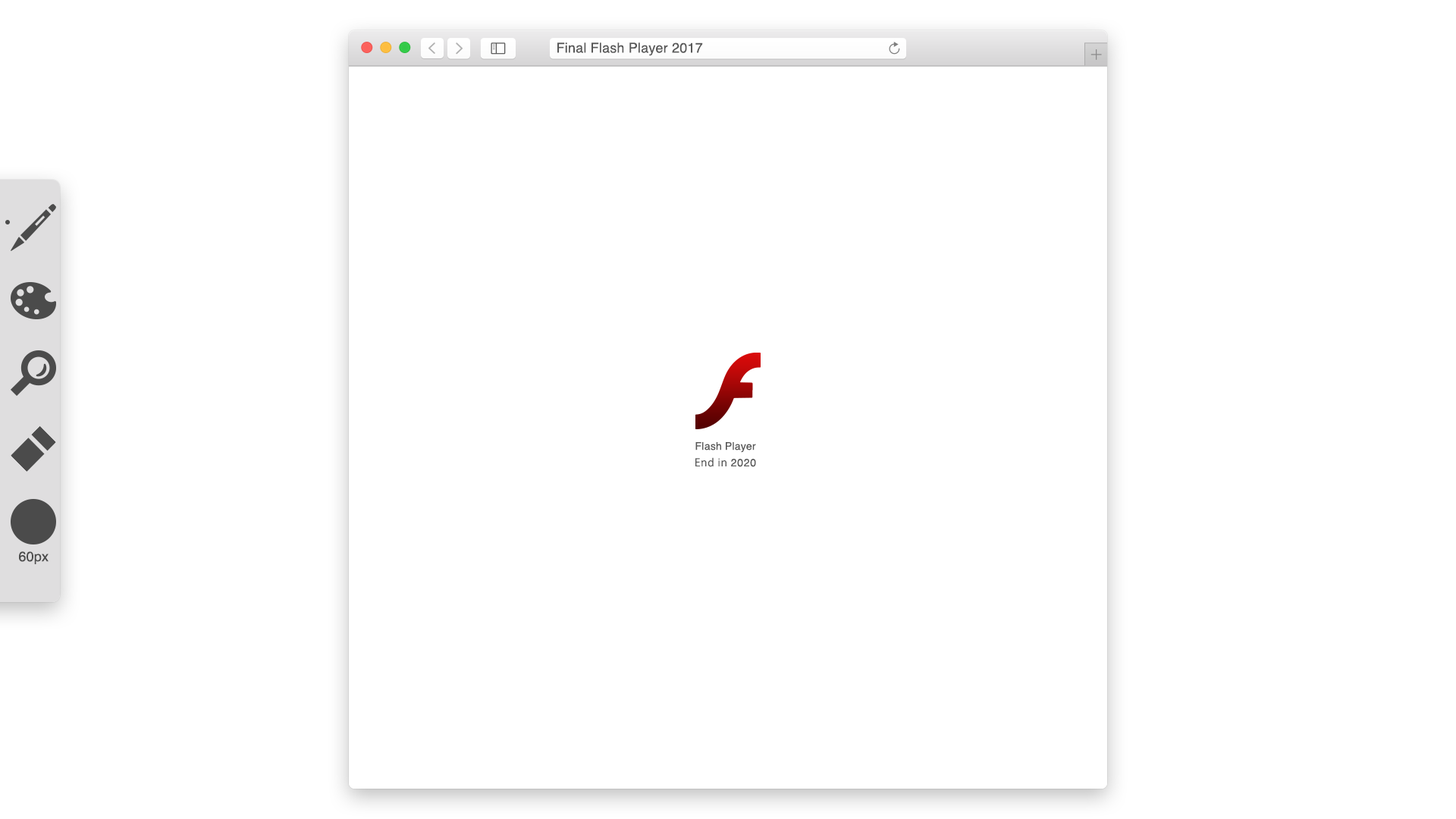
<style>
.page{position:relative;width:1456px;height:819px;background:#ffffff}
.page>*{position:absolute;margin:0}
.t1{font:13.6px "Helvetica";letter-spacing:0.01em;color:#585858}
.t2{font:10.6px/16.6px "Helvetica";letter-spacing:0.01em;color:#585858}
.t3{font:10.6px/16.6px "KozGoPr6N-Regular";letter-spacing:0.05em;color:#585858}
.t4{font:10.6px/16.6px "Helvetica";letter-spacing:0.05em;color:#585858}
.t5{font:13.6px "Helvetica";letter-spacing:0.01em;color:#4b4b4b}
</style>
<div class="page">
<p class="t1" style="left:557px;top:42px;width:146px;height:14px">Final Flash Player 2017</p>
<p class="t2" style="left:695px;top:442px;width:61px;height:25px;text-align:center">Flash Player<br><span class="t3">End in </span><span class="t4">2020</span></p>
<p class="t5" style="left:19px;top:551px;width:30px;height:13px">60px</p>
</div>
